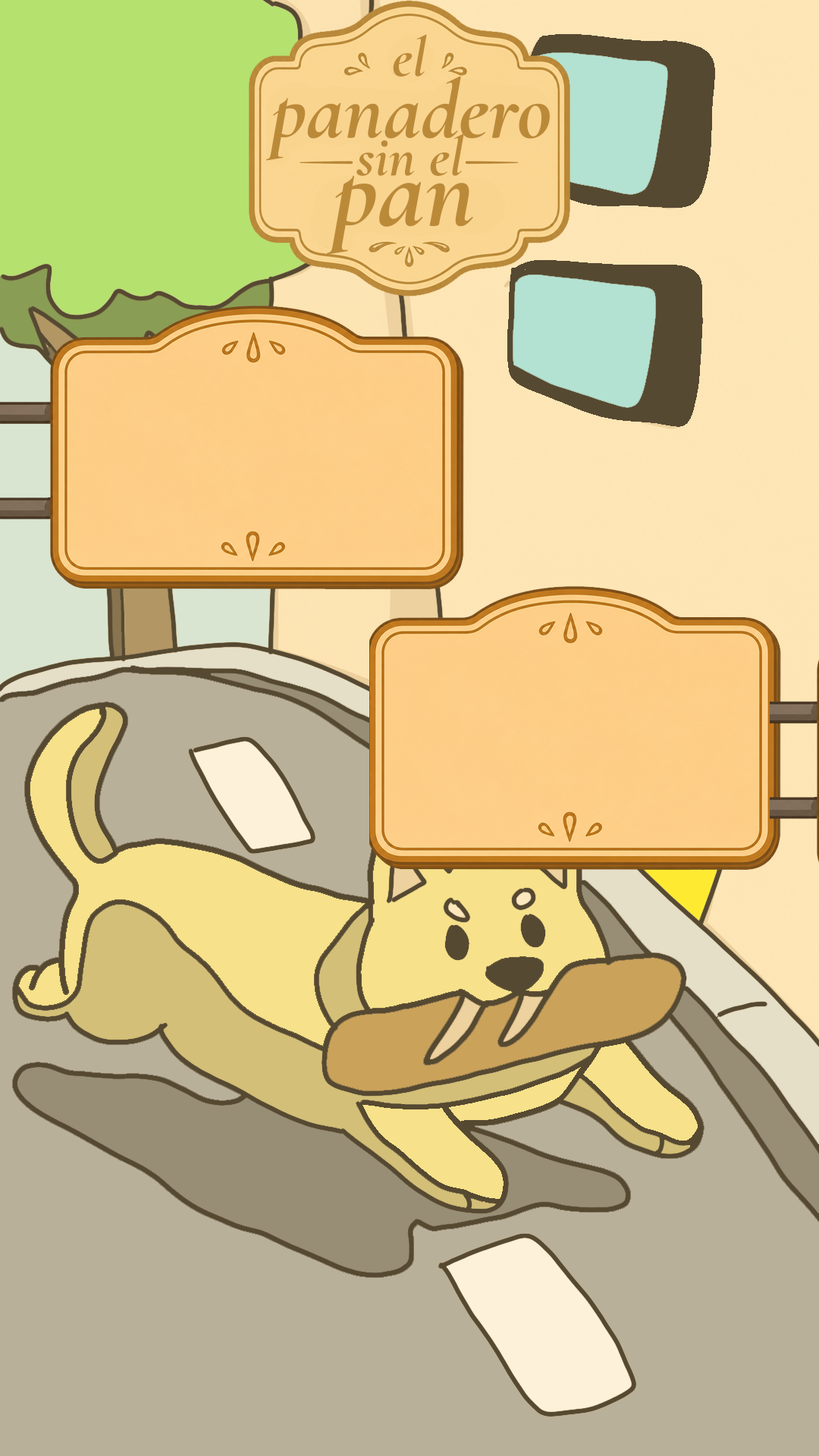
<style>
.page{position:relative;width:819px;height:1456px;background:#b9b09a}
.page>*{position:absolute;margin:0}
.t1{font:57px "CormorantGaramondItalic-BoldItalic";color:#bb8a39}
.t2{font:84px "CormorantGaramondItalic-BoldItalic";color:#bb8a39}
.t3{font:106px "CormorantGaramondItalic-BoldItalic";color:#bb8a39}
</style>
<div class="page">
<p class="t1" style="left:393px;top:34px;width:34px;height:43px">el</p>
<p class="t2" style="left:266px;top:76px;width:284px;height:85px">panadero</p>
<p class="t1" style="left:356px;top:133px;width:108px;height:43px">sin el</p>
<p class="t3" style="left:326px;top:175px;width:147px;height:80px">pan</p>
</div>
